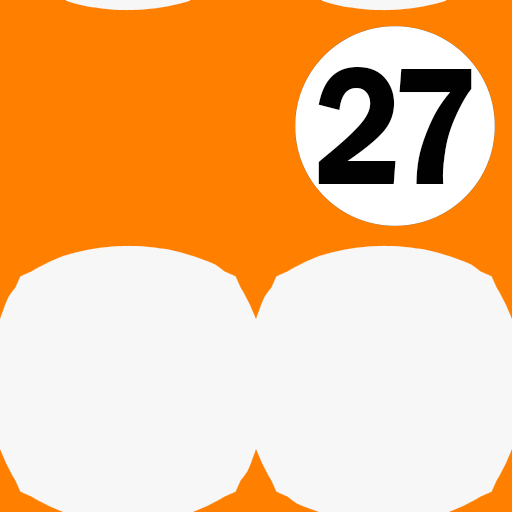
<style>
.page{position:relative;width:512px;height:512px;background:#f7f7f7}
.page>*{position:absolute;margin:0}
.t1{font:172.5px "FranklinGothic-Demi";letter-spacing:-0.05em;color:#010101;scale:0.87 1}
</style>
<div class="page">
<p class="t1" style="left:318px;top:67px;width:154px;height:117px">27</p>
</div>
